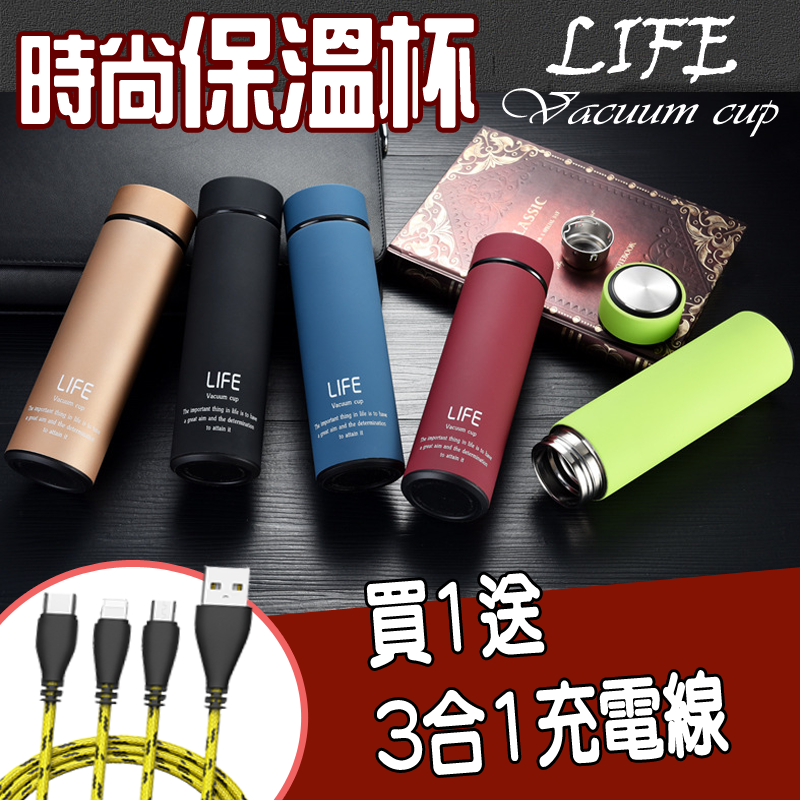
<style>
.page{position:relative;width:800px;height:800px}
.page>*{position:absolute;margin:0}
.t1{font:118.6px "HanWangZonYi";color:#ffffff;scale:0.84 1}
.t2{font:94.9px "HanWangZonYi";color:#ffffff;scale:0.84 1}
.t3{font:80px "VinerHandITC";color:#ffffff}
.t4{font:48px "Vivaldii";color:#ffffff;scale:1.37 1}
.t5{font:88.9px "HanWangYenHeavy";color:#ffffff;scale:0.72 1}
</style>
<div class="page">
<p class="t1" style="left:21px;top:16px;width:454px;height:112px"><span class="t2">時尚</span>保溫杯</p>
<p class="t3" style="left:546px;top:15px;width:191px;height:69px">LIFE</p>
<p class="t4" style="left:502px;top:88px;width:277px;height:49px">Vacuum cup</p>
<p class="t5" style="left:366px;top:573px;width:363px;height:202px;rotate:-4deg">買1送<br>3合1充電線</p>
</div>
